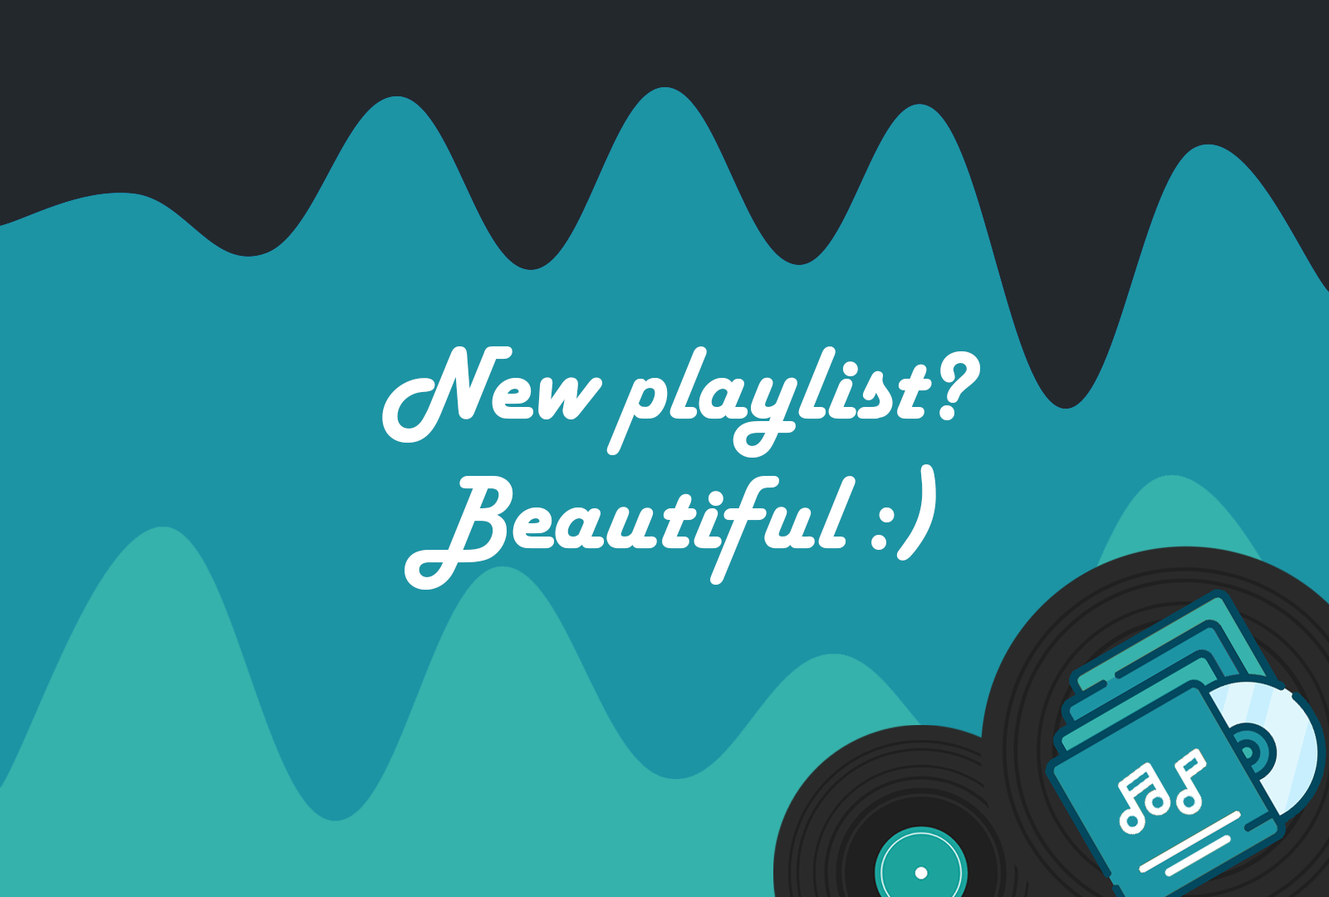
<style>
.page{position:relative;width:1329px;height:897px;background:#1c94a4}
.page>*{position:absolute;margin:0}
.t1{font:108px "HarlowSolidPlain";color:#ffffff}
</style>
<div class="page">
<p class="t1" style="left:382px;top:346px;width:598px;height:244px;text-align:center">New playlist?<br>Beautiful :)</p>
</div>
